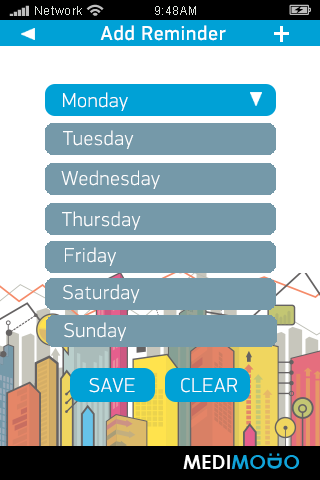
<style>
.page{position:relative;width:320px;height:480px;background:#ffffff}
.page>*{position:absolute;margin:0}
.t1{font:12px "ArialMT";letter-spacing:0.05em;color:#dfe4de}
.t2{font:20px "PFDinDisplayPro-Regular";letter-spacing:0.05em;color:#ffffff}
.t3{font:20px "PFDinDisplayPro-Thin";letter-spacing:0.05em;color:#ffffff}
</style>
<div class="page">
<p class="t1" style="left:35px;top:6px;width:47px;height:9px">Network</p>
<p class="t1" style="left:155px;top:6px;width:41px;height:9px">9:48AM</p>
<p class="t2" style="left:100px;top:25px;width:126px;height:16px">Add Reminder</p>
<p class="t3" style="left:63px;top:92px;width:65px;height:19px">Monday</p>
<p class="t3" style="left:63px;top:130px;width:71px;height:19px">Tuesday</p>
<p class="t3" style="left:61px;top:170px;width:99px;height:19px">Wednesday</p>
<p class="t3" style="left:62px;top:211px;width:79px;height:19px">Thursday</p>
<p class="t3" style="left:65px;top:247px;width:51px;height:19px">Friday</p>
<p class="t3" style="left:63px;top:284px;width:77px;height:19px">Saturday</p>
<p class="t3" style="left:64px;top:322px;width:62px;height:19px">Sunday</p>
<p class="t3" style="left:89px;top:378px;width:46px;height:15px">SAVE</p>
<p class="t3" style="left:181px;top:378px;width:56px;height:15px">CLEAR</p>
</div>
